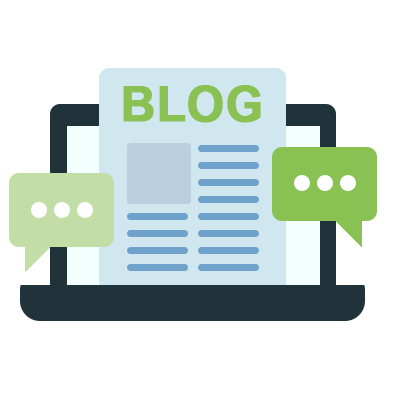
<style>
.page{position:relative;width:400px;height:400px;background:#ffffff}
.page>*{position:absolute;margin:0}
.t1{font:48px "Arial-BoldMT";color:#8ac153;font-weight:bold}
</style>
<div class="page">
<p class="t1" style="left:123px;top:85px;width:138px;height:38px">BLOG</p>
</div>
